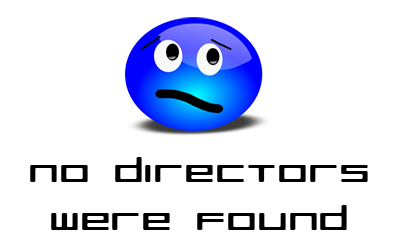
<style>
.page{position:relative;width:400px;height:250px;background:#ffffff}
.page>*{position:absolute;margin:0}
.t1{font:32px "RazerRegular";color:#000000;scale:1.5 1}
</style>
<div class="page">
<p class="t1" style="left:30px;top:157px;width:338px;height:73px;text-align:center">No directors<br>were found</p>
</div>
